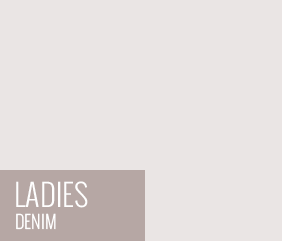
<style>
.page{position:relative;width:282px;height:241px;background:#eae5e4}
.page>*{position:absolute;margin:0}
.t1{font:30px "Oswald-Light";color:#ffffff;text-transform:uppercase}
.t2{font:18px "Oswald-Light";color:#ffffff;text-transform:uppercase}
</style>
<div class="page">
<p class="t1" style="left:16px;top:181px;width:72px;height:27px">ladies</p>
<p class="t2" style="left:16px;top:213px;width:40px;height:17px">Denim</p>
</div>
